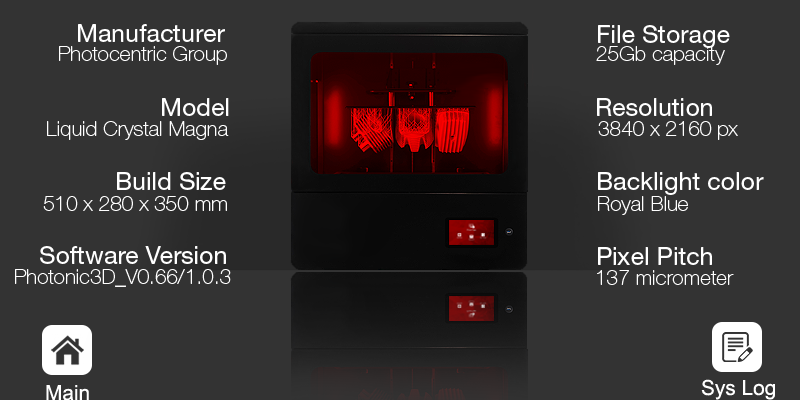
<style>
.page{position:relative;width:800px;height:400px;background:#333333}
.page>*{position:absolute;margin:0}
.t1{font:25px "HelveticaNeue-Roman";color:#ffffff}
.t2{font:20.8px "HelveticaNeueLTStd-Th";color:#ffffff}
.t3{font:20.8px "ArialMT";color:#ffffff}
</style>
<div class="page">
<p class="t1" style="left:78px;top:24px;width:147px;height:18px">Manufacturer</p>
<p class="t1" style="left:598px;top:25px;width:132px;height:23px">File Storage</p>
<p class="t2" style="left:59px;top:46px;width:168px;height:19px">Photocentric Group</p>
<p class="t2" style="left:596px;top:46px;width:129px;height:19px">25Gb capacity</p>
<p class="t1" style="left:162px;top:98px;width:67px;height:18px">Model</p>
<p class="t1" style="left:597px;top:98px;width:115px;height:18px">Resolution</p>
<p class="t2" style="left:47px;top:121px;width:182px;height:19px">Liquid Crystal Magna</p>
<p class="t2" style="left:598px;top:121px;width:140px;height:19px">3840 x 2160 px</p>
<p class="t1" style="left:117px;top:172px;width:109px;height:18px">Build Size</p>
<p class="t1" style="left:598px;top:172px;width:166px;height:23px">Backlight color</p>
<p class="t2" style="left:43px;top:196px;width:184px;height:15px">510 x 280 x 350 mm</p>
<p class="t2" style="left:598px;top:196px;width:90px;height:19px">Royal Blue</p>
<p class="t1" style="left:40px;top:246px;width:186px;height:18px">Software Version</p>
<p class="t1" style="left:598px;top:247px;width:114px;height:18px">Pixel Pitch</p>
<p class="t2" style="left:15px;top:269px;width:216px;height:18px">Photonic3D_V0.66/1.0.3</p>
<p class="t2" style="left:597px;top:270px;width:137px;height:15px">137 micrometer</p>
<p class="t3" style="left:46px;top:385px;width:43px;height:16px">Main</p>
<p class="t3" style="left:701px;top:379px;width:74px;height:21px">Sys Log</p>
</div>
